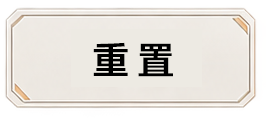
<style>
.page{position:relative;width:266px;height:121px}
.page>*{position:absolute;margin:0}
.t1{font:37.5px "HarmonyOS_Sans_SC_Bold";letter-spacing:0.2em;color:#000000}
</style>
<div class="page">
<p class="t1" style="left:93px;top:42px;width:80px;height:35px">重置</p>
</div>
